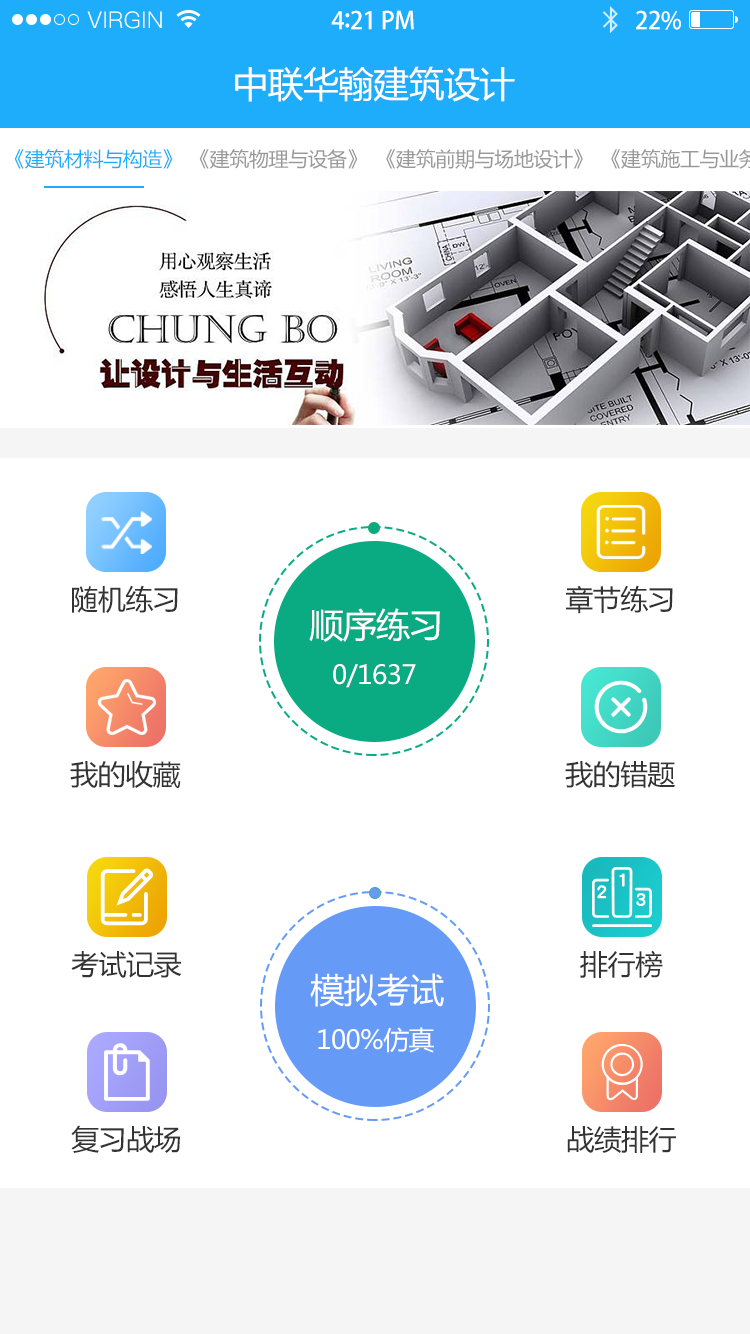
<style>
.page{position:relative;width:750px;height:1334px;background:#ffffff}
.page>*{position:absolute;margin:0}
.t1{font:23px "PingFang-SC-Regular";letter-spacing:0.02em;color:#ffffff}
.t2{font:24px "AdobeHeitiStd-Regular";letter-spacing:-0.02em;color:#ffffff}
.t3{font:26px "AdobeHeitiStd-Regular";letter-spacing:-0.02em;color:#ffffff}
.t4{font:36px "MicrosoftYaHei";letter-spacing:-0.02em;color:#ffffff}
.t5{font:20px "MicrosoftYaHei";letter-spacing:-0.02em;color:#1dadfa}
.t6{font:20px "MicrosoftYaHei";letter-spacing:-0.02em;color:#999999}
.t7{font:28px "MicrosoftYaHei";letter-spacing:-0.02em;color:#333333}
.t8{font:34px "MicrosoftYaHei";letter-spacing:-0.02em;color:#ffffff}
.t9{font:26px "MicrosoftYaHei";letter-spacing:-0.02em;color:#ffffff}
</style>
<div class="page">
<p class="t1" style="left:87px;top:11px;width:75px;height:18px">VIRGIN</p>
<p class="t2" style="left:331px;top:10px;width:83px;height:20px">4<span class="t3">:</span>21 PM</p>
<p class="t2" style="left:636px;top:10px;width:45px;height:20px">22%</p>
<p class="t4" style="left:235px;top:66px;width:280px;height:36px">中联华翰建筑设计</p>
<p class="t5" style="left:14px;top:149px;width:159px;height:20px">《建筑材料与构造》</p>
<p class="t6" style="left:199px;top:149px;width:159px;height:20px">《建筑物理与设备》</p>
<p class="t6" style="left:386px;top:149px;width:197px;height:20px">《建筑前期与场地设计》</p>
<p class="t7" style="left:72px;top:585px;width:106px;height:28px">随机练习</p>
<p class="t7" style="left:566px;top:585px;width:107px;height:29px">章节练习</p>
<p class="t8" style="left:309px;top:608px;width:131px;height:34px">顺序练习</p>
<p class="t9" style="left:333px;top:664px;width:83px;height:24px">0/1637</p>
<p class="t7" style="left:70px;top:760px;width:111px;height:29px">我的收藏</p>
<p class="t7" style="left:565px;top:761px;width:110px;height:27px">我的错题</p>
<p class="t7" style="left:71px;top:951px;width:111px;height:27px">考试记录</p>
<p class="t7" style="left:580px;top:950px;width:83px;height:28px">排行榜</p>
<p class="t8" style="left:310px;top:973px;width:134px;height:34px">模拟考试</p>
<p class="t9" style="left:318px;top:1027px;width:116px;height:26px">100%仿真</p>
<p class="t7" style="left:71px;top:1125px;width:109px;height:28px">复习战场</p>
<p class="t7" style="left:567px;top:1126px;width:109px;height:27px">战绩排行</p>
</div>
